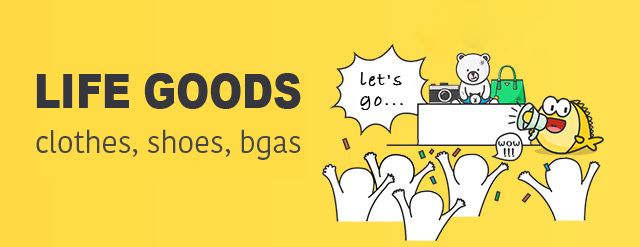
<style>
.page{position:relative;width:640px;height:247px;background:#ffdc45}
.page>*{position:absolute;margin:0}
.t1{font:46.6px "Arial-Black";letter-spacing:-0.01em;color:#36363e;scale:0.86 1}
.t2{font:20px/20px "BradleyHandITCTT-Bold";letter-spacing:0.1em;color:#000000}
.t3{font:30px "KohinoorBangla-Regular";letter-spacing:-0.01em;color:#48484a}
</style>
<div class="page">
<p class="t1" style="left:36px;top:73px;width:265px;height:36px">LIFE GOODS</p>
<p class="t2" style="left:360px;top:72px;width:43px;height:39px">let's<br>go...</p>
<p class="t3" style="left:36px;top:129px;width:265px;height:31px">clothes, shoes, bgas</p>
</div>
